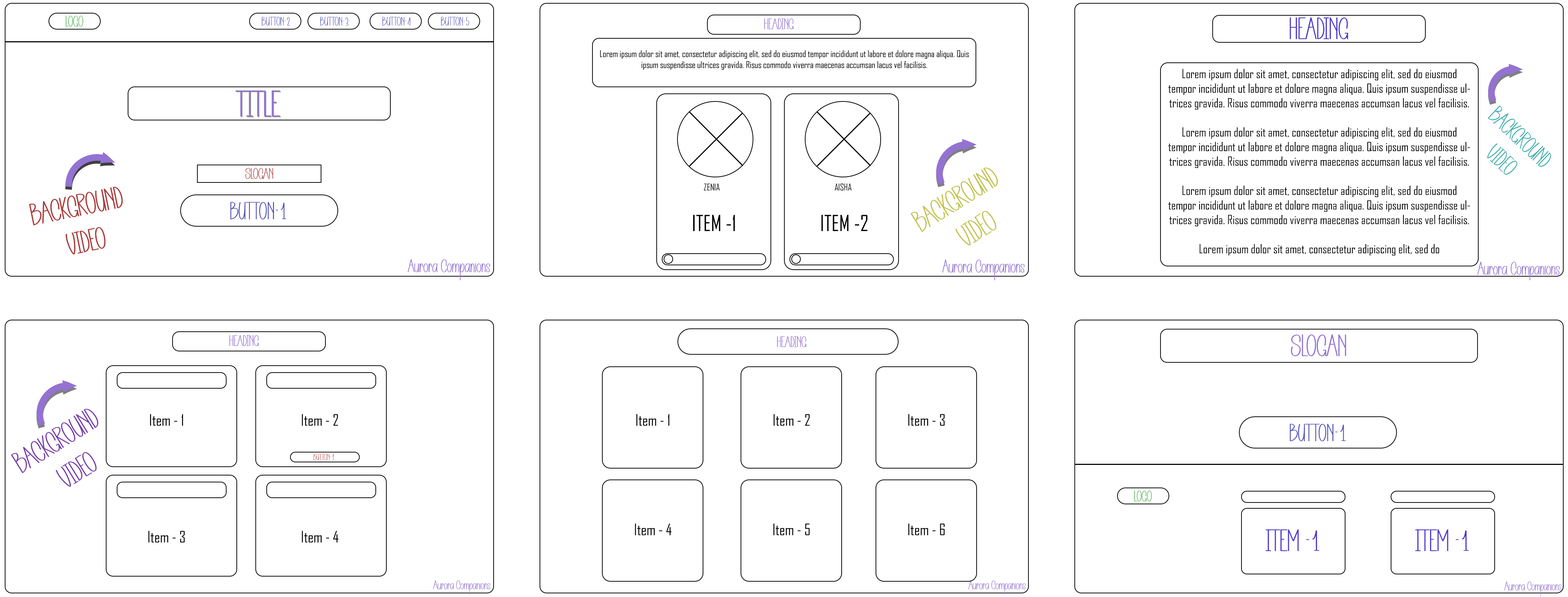
<style>
.page{position:relative;width:1568px;height:597px;background:#ffffff}
.page>*{position:absolute;margin:0}
.t1{font:15.2px "BirthdayPartyRegular";color:#50b752}
.t2{font:12.2px "BirthdayPartyRegular";color:#5052b7}
.t3{font:30.4px "BirthdayPartyRegular";color:#4d38cc}
.t4{font:15.2px "BirthdayPartyRegular";color:#9472d2}
.t5{font:9.1px "AgencyFB-Reg";color:#000000}
.t6{font:12.2px "AgencyFB-Reg";color:#000000}
.t7{font:36.5px "BirthdayPartyRegular";color:#9472d2}
.t8{font:24.4px "BirthdayPartyRegular";color:#3bacab}
.t9{font:15.2px "BirthdayPartyRegular";color:#ac3b3b}
.t10{font:30.4px "BirthdayPartyRegular";color:#c2c14b}
.t11{font:30.4px "BirthdayPartyRegular";color:#ac3b3b}
.t12{font:24.3px "BirthdayPartyRegular";color:#5052b7}
.t13{font:21.2px "AgencyFB-Reg";color:#000000}
.t14{font:18.2px "BirthdayPartyRegular";color:#9472d2}
.t15{font:30.4px "BirthdayPartyRegular";color:#9472d2}
.t16{font:30.4px "BirthdayPartyRegular";color:#753bac}
.t17{font:15.2px "AgencyFB-Reg";color:#000000}
.t18{font:9.1px "BirthdayPartyRegular";color:#bb3d3d}
.t19{font:12.7px "BirthdayPartyRegular";color:#9472d2}
</style>
<div class="page">
<p class="t1" style="left:66px;top:16px;width:17px;height:11px">LOGO</p>
<p class="t2" style="left:262px;top:17px;width:28px;height:9px">BUTTON-2</p>
<p class="t2" style="left:320px;top:17px;width:28px;height:9px">BUTTON-3</p>
<p class="t2" style="left:382px;top:17px;width:28px;height:9px">BUTTON-4</p>
<p class="t2" style="left:441px;top:17px;width:28px;height:9px">BUTTON-5</p>
<p class="t3" style="left:1290px;top:17px;width:58px;height:22px">HEADING</p>
<p class="t4" style="left:764px;top:18px;width:29px;height:12px">HEADING</p>
<p class="t5" style="left:600px;top:50px;width:369px;height:20px;text-align:center">Lorem ipsum dolor sit amet, consectetur adipiscing elit, sed do eiusmod tempor incididunt ut labore et dolore magna aliqua. Quis ipsum suspendisse ultrices gravida. Risus commodo viverra maecenas accumsan lacus vel facilisis.</p>
<p class="t6" style="left:1168px;top:69px;width:302px;height:187px;text-align:center">Lorem ipsum dolor sit amet, consectetur adipiscing elit, sed do eiusmod tempor incididunt ut labore et dolore magna aliqua. Quis ipsum suspendisse ultrices gravida. Risus commodo viverra maecenas accumsan lacus vel facilisis.<br><br>Lorem ipsum dolor sit amet, consectetur adipiscing elit, sed do eiusmod tempor incididunt ut labore et dolore magna aliqua. Quis ipsum suspendisse ultrices gravida. Risus commodo viverra maecenas accumsan lacus vel facilisis. <br><br>Lorem ipsum dolor sit amet, consectetur adipiscing elit, sed do eiusmod tempor incididunt ut labore et dolore magna aliqua. Quis ipsum suspendisse ultrices gravida. Risus commodo viverra maecenas accumsan lacus vel facilisis.  <br><br>Lorem ipsum dolor sit amet, consectetur adipiscing elit, sed do</p>
<p class="t7" style="left:235px;top:90px;width:45px;height:27px">TITLE</p>
<p class="t8" style="left:1487px;top:105px;width:64px;height:70px;text-align:center;rotate:43deg">BACKGROUND <br>VIDEO</p>
<p class="t9" style="left:245px;top:168px;width:28px;height:11px">SLOGAN</p>
<p class="t10" style="left:911px;top:167px;width:87px;height:79px;text-align:center;rotate:-32deg">BACKGROUND <br>VIDEO</p>
<p class="t5" style="left:704px;top:184px;width:16px;height:6px">ZENIA</p>
<p class="t5" style="left:835px;top:184px;width:16px;height:6px">AISHA</p>
<p class="t11" style="left:29px;top:187px;width:94px;height:68px;text-align:center;rotate:-12deg">BACKGROUND <br>VIDEO</p>
<p class="t11" style="left:29px;top:187px;width:94px;height:68px;text-align:center;rotate:-12deg">BACKGROUND <br>VIDEO</p>
<p class="t12" style="left:230px;top:202px;width:56px;height:18px">BUTTON-1</p>
<p class="t13" style="left:693px;top:215px;width:42px;height:16px">ITEM -1</p>
<p class="t13" style="left:821px;top:215px;width:47px;height:16px">ITEM -2</p>
<p class="t14" style="left:408px;top:259px;width:82px;height:22px">Aurora Companions</p>
<p class="t14" style="left:942px;top:259px;width:83px;height:22px">Aurora Companions</p>
<p class="t14" style="left:1477px;top:262px;width:83px;height:21px">Aurora Companions</p>
<p class="t4" style="left:229px;top:335px;width:30px;height:11px">HEADING</p>
<p class="t4" style="left:777px;top:336px;width:29px;height:11px">HEADING</p>
<p class="t15" style="left:1291px;top:334px;width:55px;height:22px">SLOGAN</p>
<p class="t16" style="left:11px;top:409px;width:88px;height:78px;text-align:center;rotate:-32deg">BACKGROUND <br>VIDEO</p>
<p class="t17" style="left:150px;top:414px;width:33px;height:12px">Item - 1</p>
<p class="t17" style="left:302px;top:414px;width:36px;height:12px">Item - 2</p>
<p class="t17" style="left:636px;top:414px;width:33px;height:12px">Item - 1</p>
<p class="t17" style="left:773px;top:414px;width:37px;height:12px">Item - 2</p>
<p class="t17" style="left:908px;top:414px;width:37px;height:12px">Item - 3</p>
<p class="t12" style="left:1290px;top:424px;width:56px;height:17px">BUTTON-1</p>
<p class="t18" style="left:313px;top:453px;width:22px;height:7px">BUTTON-1</p>
<p class="t1" style="left:1134px;top:490px;width:18px;height:12px">LOGO</p>
<p class="t17" style="left:148px;top:530px;width:37px;height:12px">Item - 3</p>
<p class="t17" style="left:302px;top:530px;width:37px;height:12px">Item - 4</p>
<p class="t17" style="left:635px;top:523px;width:37px;height:12px">Item - 4</p>
<p class="t17" style="left:773px;top:523px;width:37px;height:12px">Item - 5</p>
<p class="t17" style="left:908px;top:523px;width:37px;height:12px">Item - 6</p>
<p class="t3" style="left:1266px;top:529px;width:54px;height:22px">ITEM -1</p>
<p class="t3" style="left:1415px;top:529px;width:54px;height:22px">ITEM -1</p>
<p class="t19" style="left:433px;top:580px;width:57px;height:15px">Aurora Companions</p>
<p class="t19" style="left:968px;top:580px;width:58px;height:15px">Aurora Companions</p>
<p class="t19" style="left:1504px;top:581px;width:57px;height:15px">Aurora Companions</p>
</div>
